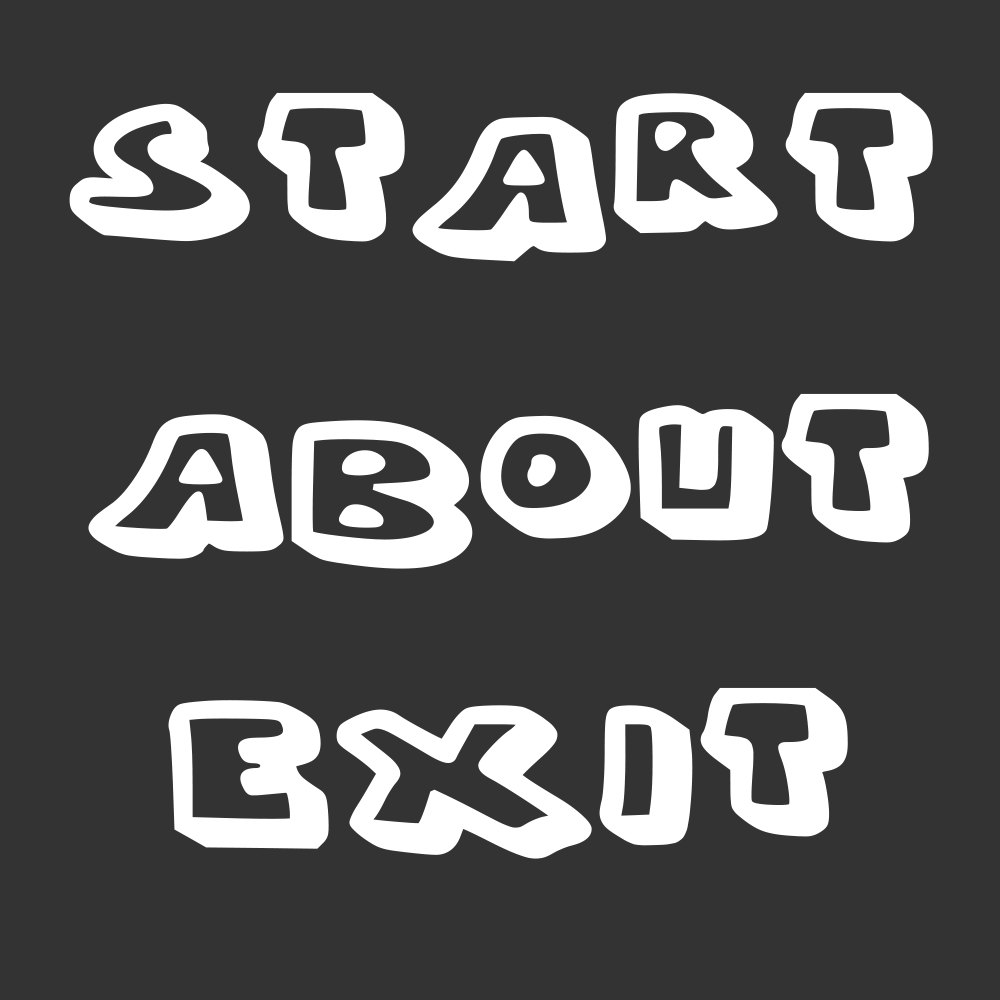
<style>
.page{position:relative;width:1000px;height:1000px;background:#333333}
.page>*{position:absolute;margin:0}
.t1{font:200px "Whypo";color:#ffffff;font-weight:bold;scale:1.24 1}
</style>
<div class="page">
<p class="t1" style="left:69px;top:92px;width:864px;height:170px">Start</p>
<p class="t1" style="left:88px;top:393px;width:841px;height:176px">About</p>
<p class="t1" style="left:168px;top:687px;width:680px;height:172px">Exit</p>
</div>
